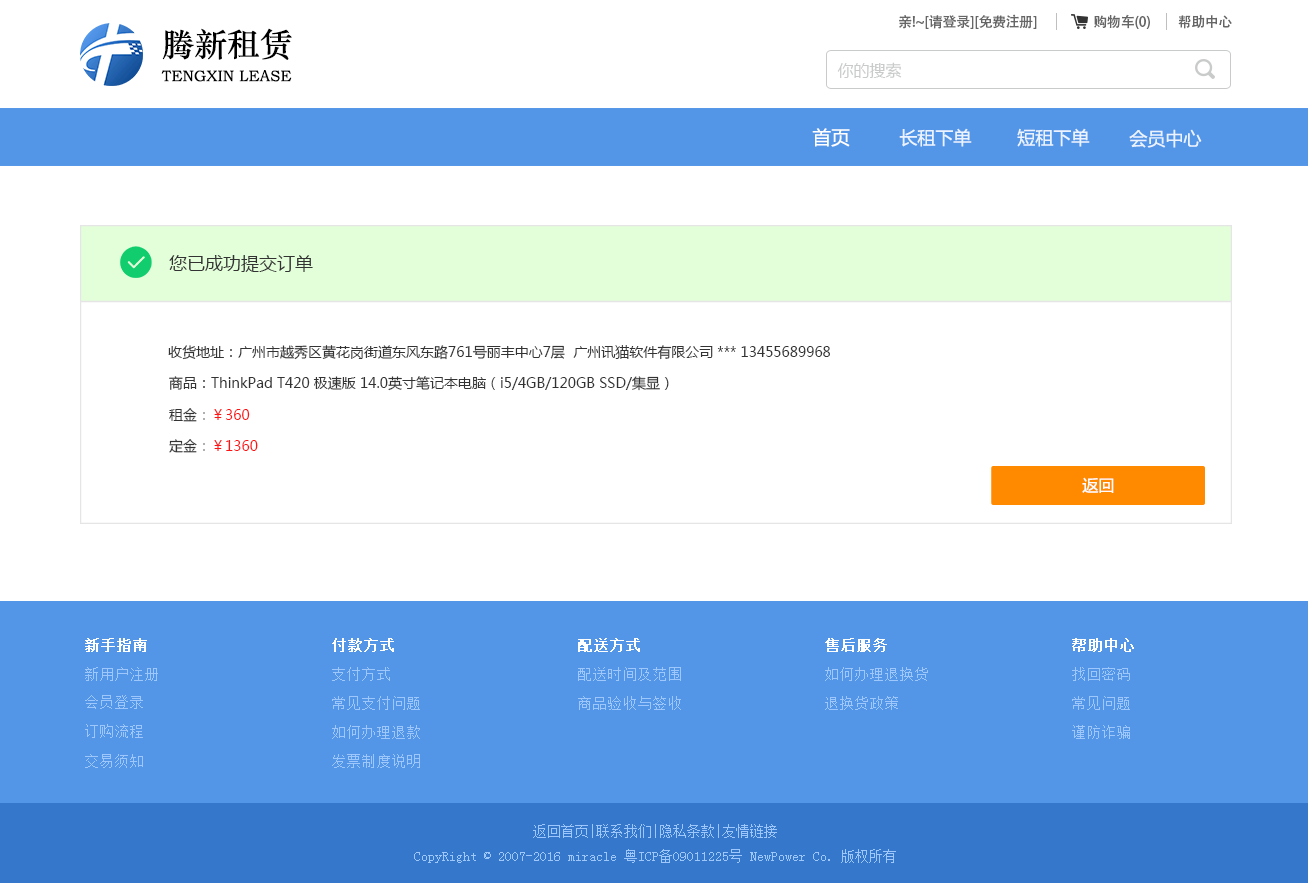
<style>
.page{position:relative;width:1308px;height:883px;background:#ffffff}
.page>*{position:absolute;margin:0}
.t1{font:14px "AdobeHeitiStd-Regular";letter-spacing:-0.02em;color:#666666}
.t2{font:32.6px "STZhongsong";color:#000000}
.t3{font:16px "MicrosoftYaHei";color:#c9caca}
.t4{font:15.5px "STZhongsong";color:#000000}
.t5{font:18.8px "MicrosoftYaHei";color:#ffffff}
.t6{font:18px "MicrosoftYaHei";color:#eaf3ff}
.t7{font:18px "MicrosoftYaHei";color:#333333}
.t8{font:14px "MicrosoftYaHei";color:#333333}
.t9{font:14px "MicrosoftYaHei";color:#fd1414}
.t10{font:14px "MicrosoftYaHei";color:#999999}
.t11{font:16px "MicrosoftYaHei";color:#fffefe}
.t12{font:15px "SimSun";color:#ffffff;font-weight:bold}
.t13{font:15px "SimSun";color:#9ec8fd}
.t14{font:14px "SimSun";color:#9ec8fd}
</style>
<div class="page">
<p class="t1" style="left:899px;top:14px;width:138px;height:15px">亲!~[请登录][免费注册]</p>
<p class="t1" style="left:1094px;top:14px;width:56px;height:15px">购物车(0)</p>
<p class="t1" style="left:1178px;top:15px;width:54px;height:14px">帮助中心</p>
<p class="t2" style="left:162px;top:28px;width:130px;height:32px">腾新租赁</p>
<p class="t3" style="left:837px;top:62px;width:65px;height:16px">你的搜索</p>
<p class="t4" style="left:161px;top:70px;width:131px;height:12px">TENGXIN LEASE</p>
<p class="t5" style="left:812px;top:128px;width:38px;height:19px">首页</p>
<p class="t6" style="left:899px;top:128px;width:73px;height:19px">长租下单</p>
<p class="t6" style="left:1017px;top:128px;width:73px;height:19px">短租下单</p>
<p class="t6" style="left:1129px;top:129px;width:73px;height:19px">会员中心</p>
<p class="t7" style="left:169px;top:255px;width:144px;height:17px">您已成功提交订单</p>
<p class="t8" style="left:168px;top:345px;width:662px;height:15px">收货地址：广州市越秀区黄花岗街道东风东路761号丽丰中心7层  广州讯猫软件有限公司 *** 13455689968</p>
<p class="t8" style="left:169px;top:376px;width:500px;height:15px">商品：ThinkPad T420 极速版 14.0英寸笔记本电脑（i5/4GB/120GB SSD/集显）</p>
<p class="t9" style="left:169px;top:408px;width:81px;height:14px"><span class="t8">租金</span><span class="t10">：</span>￥360</p>
<p class="t9" style="left:169px;top:439px;width:89px;height:14px"><span class="t8">定金</span><span class="t10">：</span>￥1360</p>
<p class="t11" style="left:1082px;top:477px;width:32px;height:16px">返回</p>
<p class="t12" style="left:85px;top:638px;width:62px;height:14px">新手指南</p>
<p class="t12" style="left:332px;top:638px;width:62px;height:14px">付款方式</p>
<p class="t12" style="left:578px;top:638px;width:62px;height:14px">配送方式</p>
<p class="t12" style="left:825px;top:638px;width:62px;height:14px">售后服务</p>
<p class="t12" style="left:1072px;top:638px;width:62px;height:14px">帮助中心</p>
<p class="t13" style="left:85px;top:667px;width:73px;height:14px">新用户注册</p>
<p class="t13" style="left:332px;top:667px;width:58px;height:14px">支付方式</p>
<p class="t13" style="left:578px;top:667px;width:103px;height:14px">配送时间及范围</p>
<p class="t13" style="left:825px;top:667px;width:103px;height:14px">如何办理退换货</p>
<p class="t13" style="left:1072px;top:667px;width:58px;height:14px">找回密码</p>
<p class="t13" style="left:85px;top:695px;width:58px;height:14px">会员登录</p>
<p class="t13" style="left:332px;top:696px;width:88px;height:14px">常见支付问题</p>
<p class="t13" style="left:578px;top:696px;width:103px;height:14px">商品验收与签收</p>
<p class="t13" style="left:825px;top:696px;width:73px;height:14px">退换货政策</p>
<p class="t13" style="left:1072px;top:696px;width:58px;height:14px">常见问题</p>
<p class="t13" style="left:85px;top:724px;width:58px;height:14px">订购流程</p>
<p class="t13" style="left:332px;top:725px;width:88px;height:14px">如何办理退款</p>
<p class="t13" style="left:1072px;top:725px;width:58px;height:14px">谨防诈骗</p>
<p class="t13" style="left:85px;top:754px;width:58px;height:14px">交易须知</p>
<p class="t13" style="left:332px;top:754px;width:88px;height:14px">发票制度说明</p>
<p class="t14" style="left:414px;top:824px;width:482px;height:39px;text-align:center">返回首页|联系我们|隐私条款|友情链接<br>CopyRight © 2007-2016 miracle 粤ICP备09011225号 NewPower Co. 版权所有</p>
</div>
